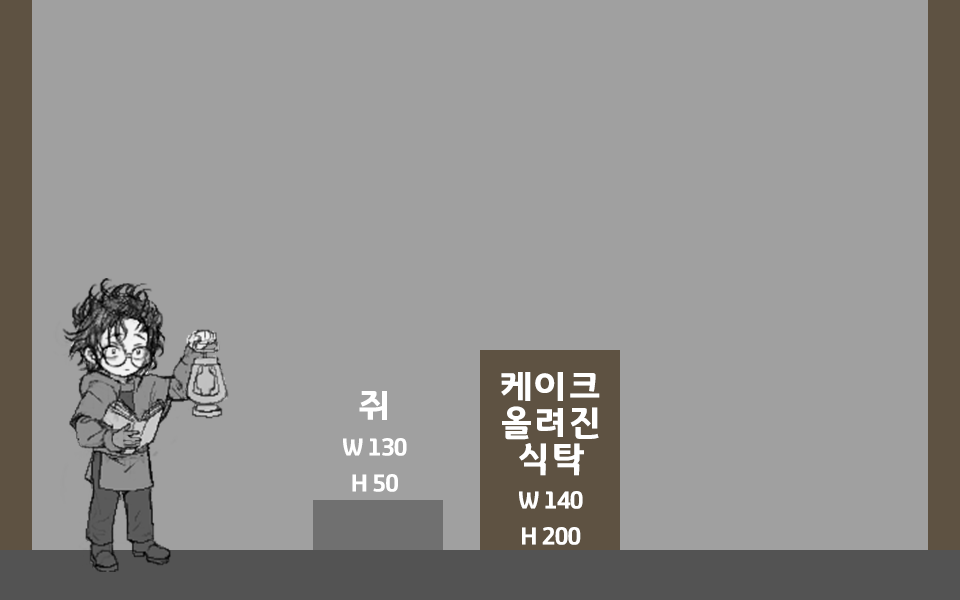
<style>
.page{position:relative;width:960px;height:600px;background:#a0a0a0}
.page>*{position:absolute;margin:0}
.t1{font:24px/36px "GyeonggiTitleV";letter-spacing:-0.05em;color:#ffffff}
.t2{font:36px/36px "GyeonggiTitleV";letter-spacing:-0.05em;color:#ffffff}
.t3{font:36px/12px "GyeonggiTitleV";letter-spacing:-0.05em;color:#ffffff}
</style>
<div class="page">
<p class="t1" style="left:501px;top:372px;width:99px;height:173px;text-align:center"><span class="t2">케이크<br>올려진<br>식탁<br><br></span>W 140<br>H 200</p>
<p class="t1" style="left:343px;top:391px;width:64px;height:101px;text-align:center"><span class="t3">쥐<br><br><br><br></span>W 130<br>H 50</p>
</div>
